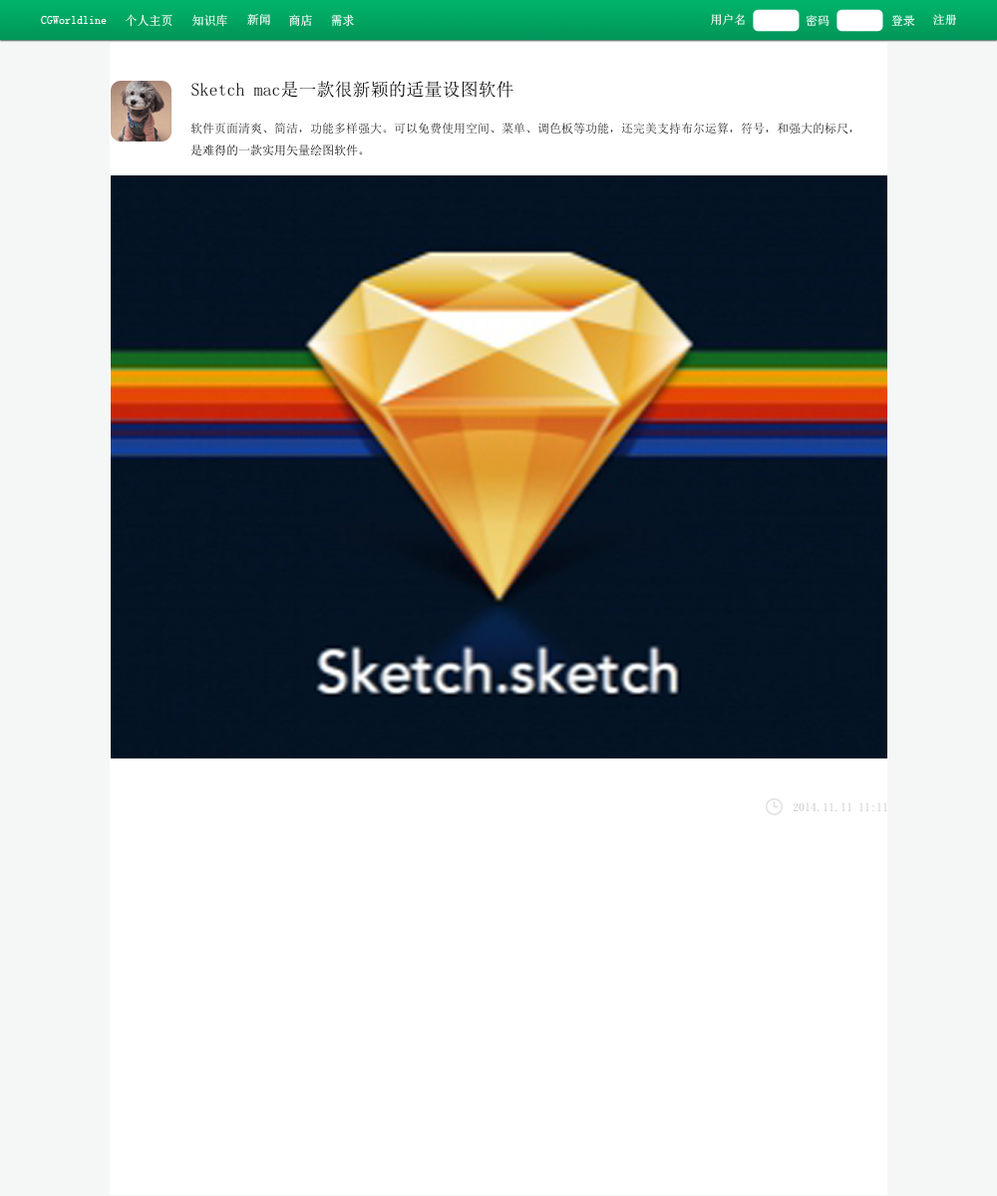
<style>
.page{position:relative;width:997px;height:1196px;background:#ffffff}
.page>*{position:absolute;margin:0}
.t1{font:12.4px "SimSun";color:#fdfcfc;scale:0.97 1}
.t2{font:12.4px "SimSun";scale:0.97 1}
.t3{font:12px "SimSun";color:#fdfcfc}
.t4{font:12px "SimSun"}
.t5{font:12px "SimSun";color:#ffffff}
.t6{font:17.9px "SimSun";color:#040404}
.t7{font:12px "SimSun";color:#1c1c1c}
.t8{font:12px "SimSun";color:#bec1c0}
</style>
<div class="page">
<p class="t1" style="left:41px;top:16px;width:66px;height:8px">CGWorldline</p>
<p class="t2" style="left:126px;top:14px;width:46px;height:13px">个人主页</p>
<p class="t2" style="left:192px;top:14px;width:35px;height:13px">知识库</p>
<p class="t2" style="left:247px;top:13px;width:23px;height:13px">新闻</p>
<p class="t1" style="left:289px;top:14px;width:23px;height:13px">商店</p>
<p class="t2" style="left:331px;top:14px;width:23px;height:13px">需求</p>
<p class="t3" style="left:711px;top:14px;width:34px;height:12px">用户名</p>
<p class="t4" style="left:805px;top:15px;width:24px;height:11px">密码</p>
<p class="t4" style="left:891px;top:15px;width:24px;height:12px">登录</p>
<p class="t5" style="left:933px;top:14px;width:23px;height:11px">注册</p>
<p class="t6" style="left:191px;top:81px;width:322px;height:17px">Sketch mac是一款很新颖的适量设图软件</p>
<p class="t7" style="left:190px;top:123px;width:662px;height:12px">软件页面清爽、简洁，功能多样强大。可以免费使用空间、菜单、调色板等功能，还完美支持布尔运算，符号，和强大的标尺，</p>
<p class="t4" style="left:190px;top:145px;width:173px;height:12px">是难得的一款实用矢量绘图软件。</p>
<p class="t8" style="left:792px;top:802px;width:95px;height:9px">2014.11.11 11:11</p>
</div>
